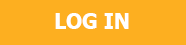
<style>
.page{position:relative;width:186px;height:45px;background:#fdaf20}
.page>*{position:absolute;margin:0}
.t1{font:20.8px "Tahoma-Bold";color:#ffffff}
</style>
<div class="page">
<p class="t1" style="left:55px;top:13px;width:74px;height:16px">LOG IN</p>
</div>
